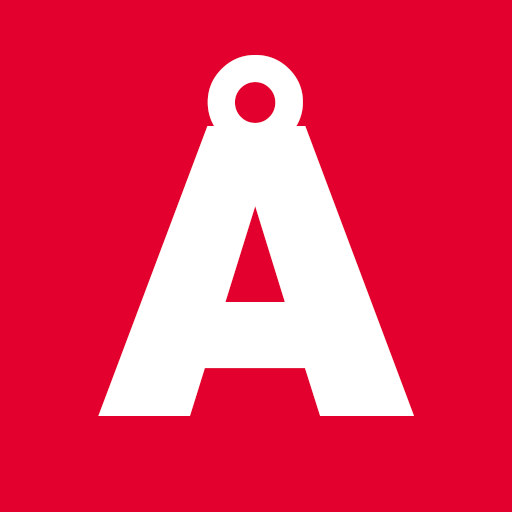
<style>
.page{position:relative;width:512px;height:512px;background:#e3002e}
.page>*{position:absolute;margin:0}
.t1{font:404.8px "Arial-Black";color:#ffffff}
</style>
<div class="page">
<p class="t1" style="left:98px;top:55px;width:316px;height:361px">Å</p>
</div>
